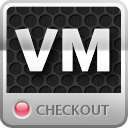
<style>
.page{position:relative;width:128px;height:128px}
.page>*{position:absolute;margin:0}
.t1{font:60px "StoneSansITC-Bold"}
.t2{font:14px "StoneSansSemITCTTSemi";color:#6e6e6e}
</style>
<div class="page">
<p class="t1" style="left:15px;top:28px;width:95px;height:44px">VM</p>
<p class="t1" style="left:15px;top:28px;width:95px;height:44px">VM</p>
<p class="t2" style="left:36px;top:105px;width:73px;height:10px">CHECKOUT</p>
</div>
